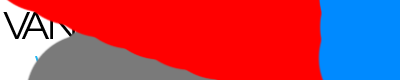
<style>
.page{position:relative;width:400px;height:80px;background:#ff0000}
.page>*{position:absolute;margin:0}
.t1{font:36.9px "HelveticaNeueLTPro-LtEx";letter-spacing:-0.026em;color:#ff0000}
.t2{font:36.9px "HelveticaNeueLTPro-LtEx";letter-spacing:-0.17em;color:#ff0000}
</style>
<div class="page">
<p class="t1" style="left:3px;top:12px;width:244px;height:27px"><span class="t2">V</span>ANDONGEN</p>
</div>
